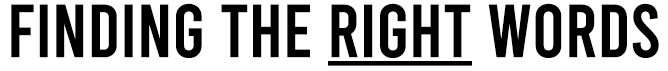
<style>
.page{position:relative;width:668px;height:71px;background:#ffffff}
.page>*{position:absolute;margin:0}
.t1{font:75px "Bebas-Regular";color:#000000}
.t2{font:60px "Bebas-Regular";color:#000000}
</style>
<div class="page">
<p class="t1" style="left:11px;top:3px;width:648px;height:55px">finding THE RIGHT WORDS</p>
<p class="t2" style="left:328px;top:61px;width:144px;height:5px">______</p>
</div>
